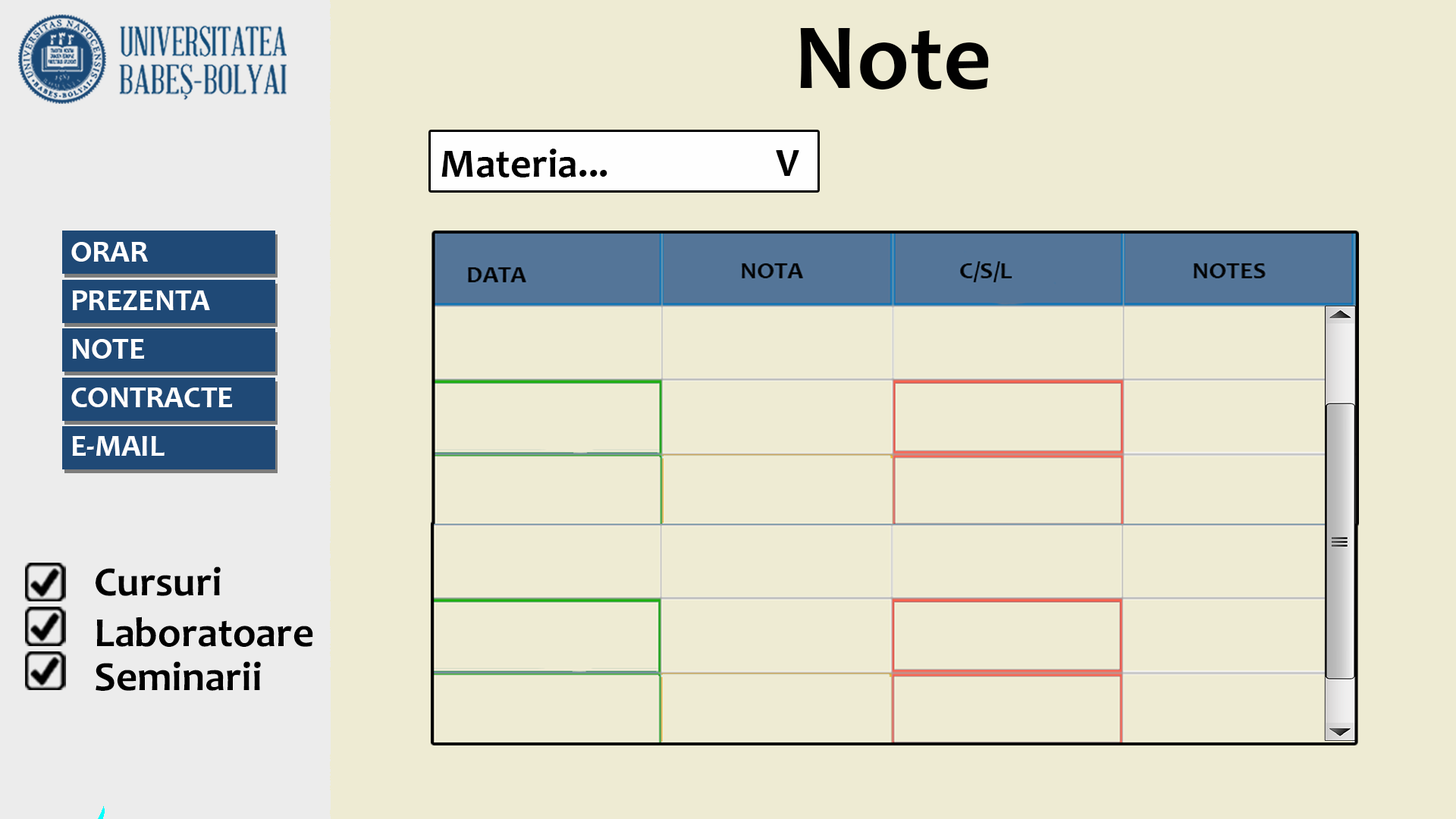
<style>
.page{position:relative;width:1456px;height:819px;background:#eeebd3}
.page>*{position:absolute;margin:0}
.t1{font:94.3px "Candara-Bold";color:#000000}
.t2{font:41.1px "Candara-Bold";color:#000000}
.t3{font:30px/48.4px "Candara-Bold";color:#ffffff;scale:1.03 1}
.t4{font:41.6px "Candara-Bold";color:#000000}
</style>
<div class="page">
<p class="t1" style="left:800px;top:28px;width:189px;height:61px">Note</p>
<p class="t2" style="left:441px;top:149px;width:166px;height:28px">Materia...</p>
<p class="t2" style="left:776px;top:150px;width:23px;height:26px">V</p>
<p class="t3" style="left:71px;top:242px;width:162px;height:214px">ORAR<br>PREZENTA<br>NOTE<br>CONTRACTE<br>E-MAIL</p>
<p class="t4" style="left:96px;top:566px;width:125px;height:30px">Cursuri</p>
<p class="t4" style="left:96px;top:617px;width:217px;height:30px">Laboratoare</p>
<p class="t4" style="left:96px;top:661px;width:165px;height:30px">Seminarii</p>
</div>
